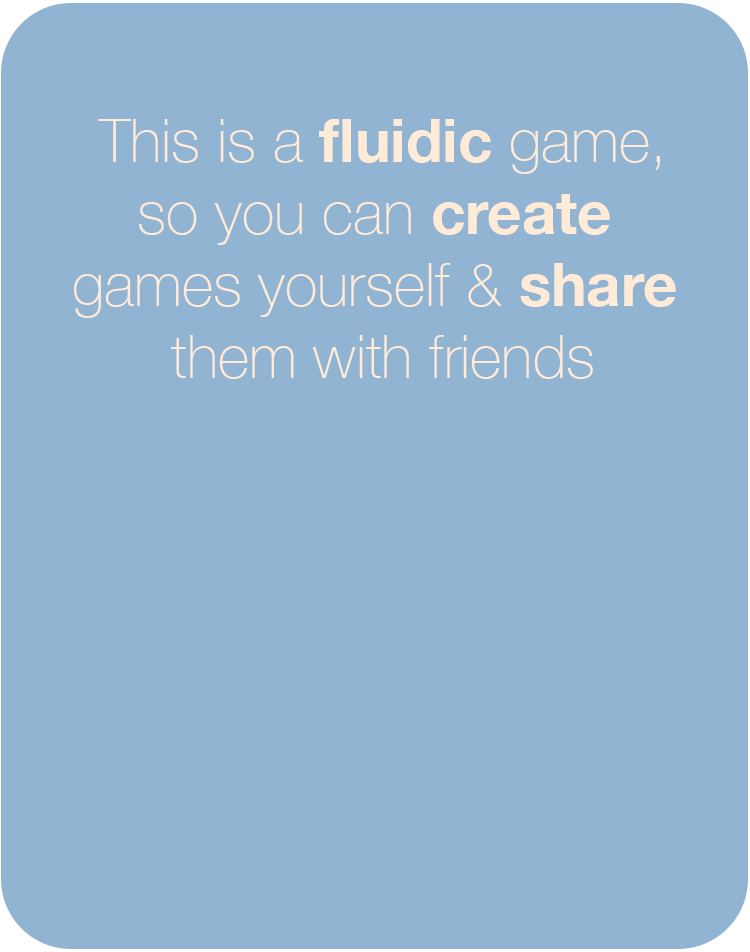
<style>
.page{position:relative;width:750px;height:952px;background:#91b4d2}
.page>*{position:absolute;margin:0}
.t1{font:60px "HelveticaNeue-Thin";color:#ffebd7}
.t2{font:40px "HelveticaNeue-Thin";color:#000000}
.t3{font:60px "HelveticaNeue-Bold";color:#ffebd7}
</style>
<div class="page">
<p class="t1" style="left:74px;top:119px;width:602px;height:260px"><span class="t2"><br></span>This is a <span class="t3">fluidic </span>game,<br>so you can <span class="t3">create <br></span>games yourself &amp; <span class="t3">share</span> <br>them with friends</p>
</div>
